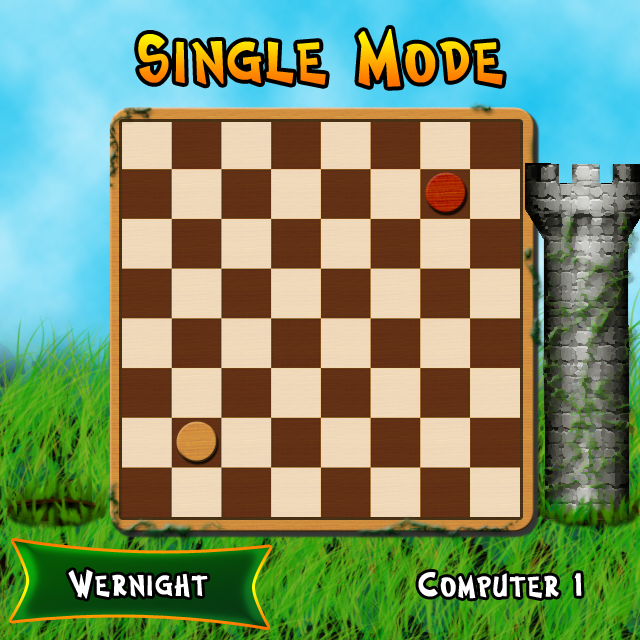
<style>
.page{position:relative;width:640px;height:640px}
.page>*{position:absolute;margin:0}
.t1{font:60px "CosmicTwoPSMT";font-weight:bold}
.t2{font:30px "CosmicTwoPSMT";color:#ffffff;font-weight:bold}
</style>
<div class="page">
<p class="t1" style="left:138px;top:29px;width:365px;height:58px">Single Mode</p>
<p class="t2" style="left:68px;top:569px;width:140px;height:30px">Wernight</p>
<p class="t2" style="left:418px;top:572px;width:164px;height:27px">Computer 1</p>
</div>
